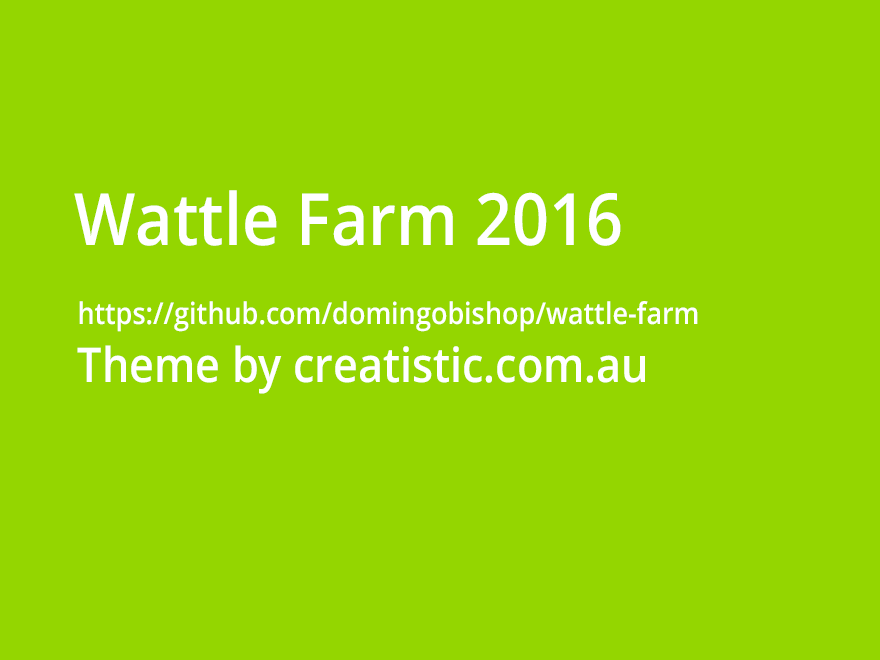
<style>
.page{position:relative;width:880px;height:660px;background:#94d600}
.page>*{position:absolute;margin:0}
.t1{font:72px "OpenSans-Semibold";color:#ffffff;scale:0.9 1}
.t2{font:30px "OpenSans-Semibold";color:#ffffff;scale:0.9 1}
.t3{font:48px "OpenSans-Semibold";color:#ffffff;scale:0.9 1}
</style>
<div class="page">
<p class="t1" style="left:74px;top:190px;width:547px;height:56px">Wattle Farm 2016</p>
<p class="t2" style="left:77px;top:301px;width:621px;height:93px">https://github.com/domingobishop/wattle-farm<br><span class="t3">Theme by creatistic.com.au</span></p>
</div>
